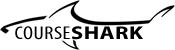
<style>
.page{position:relative;width:175px;height:50px;background:#ffffff}
.page>*{position:absolute;margin:0}
.t1{font:18.6px "MyriadPro-Cond";letter-spacing:0.02em;color:#000000;scale:1.22 1}
.t2{font:18.6px "MyriadPro-Bold";letter-spacing:0.02em;color:#000000;scale:1.22 1}
</style>
<div class="page">
<p class="t1" style="left:15px;top:26px;width:128px;height:14px">COURSE<span class="t2">SHARK</span></p>
</div>
